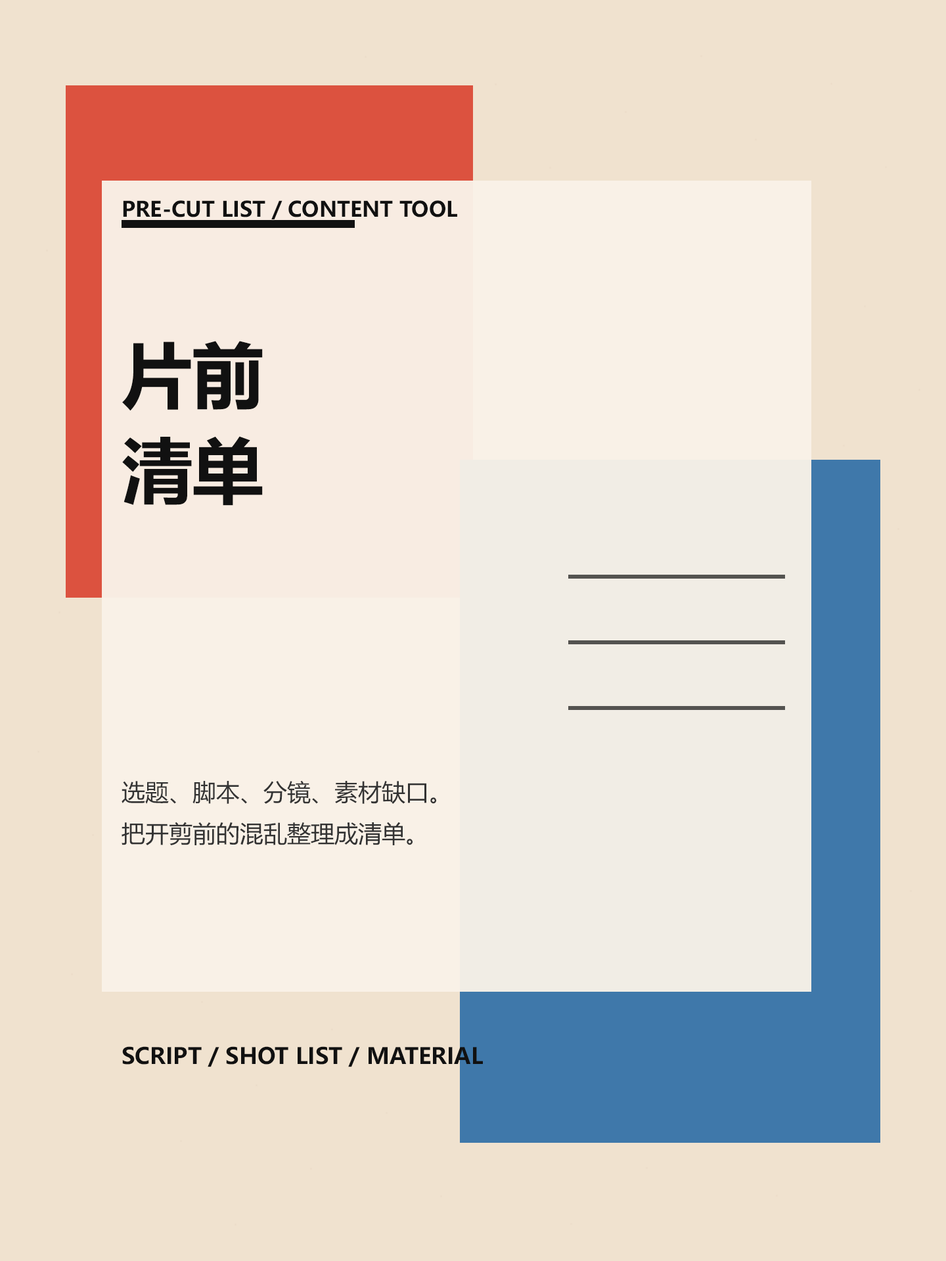
<style>
.page{position:relative;width:946px;height:1261px;background:#f0e2cf}
.page>*{position:absolute;margin:0}
.t1{font:21px "MicrosoftYaHeiUI-Bold";color:#111111}
.t2{font:70.9px "MicrosoftYaHeiUI-Bold";color:#111111}
.t3{font:23.6px "MicrosoftYaHeiUI";color:#333333}
.t4{font:22.3px "MicrosoftYaHeiUI-Bold";color:#111111}
</style>
<div class="page">
<p class="t1" style="left:123px;top:200px;width:334px;height:19px">PRE-CUT LIST / CONTENT TOOL</p>
<p class="t2" style="left:122px;top:341px;width:141px;height:69px">片前</p>
<p class="t2" style="left:122px;top:436px;width:141px;height:70px">清单</p>
<p class="t3" style="left:121px;top:780px;width:315px;height:65px">选题、脚本、分镜、素材缺口。<br>把开剪前的混乱整理成清单。</p>
<p class="t4" style="left:122px;top:1046px;width:361px;height:21px">SCRIPT / SHOT LIST / MATERIAL</p>
</div>
